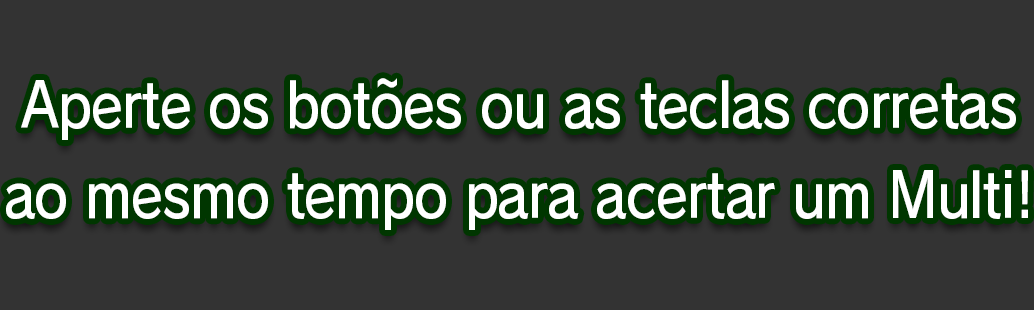
<style>
.page{position:relative;width:1034px;height:310px;background:#333333}
.page>*{position:absolute;margin:0}
.t1{font:61.3px/90.7px "RodinPro-DB";letter-spacing:-0.022em;color:#ffffff;scale:0.88 1}
</style>
<div class="page">
<p class="t1" style="left:6px;top:78px;width:1022px;height:152px;text-align:center">Aperte os botões ou as teclas corretas<br>ao mesmo tempo para acertar um Multi!</p>
</div>
